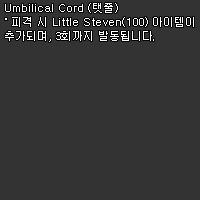
<style>
.page{position:relative;width:200px;height:200px;background:#333333}
.page>*{position:absolute;margin:0}
.t1{font:11px/14px "Dotum";color:#ffffff}
</style>
<div class="page">
<p class="t1" style="left:5px;top:3px;width:189px;height:39px">Umbilical Cord (탯줄)<br>˚ 피격 시 Little Steven(100) 아이템이<br>추가되며, 3회까지 발동됩니다.</p>
</div>
